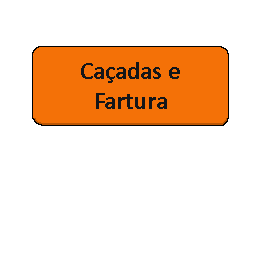
<style>
.page{position:relative;width:256px;height:256px;background:#ffffff}
.page>*{position:absolute;margin:0}
.t1{font:25px "Calibri-Bold";color:#141619}
</style>
<div class="page">
<p class="t1" style="left:81px;top:62px;width:99px;height:47px;text-align:center">Caçadas e Fartura</p>
</div>
